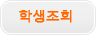
<style>
.page{position:relative;width:96px;height:35px;background:#f0f0f0}
.page>*{position:absolute;margin:0}
.t1{font:14px "DotumChe";color:#ff6600;font-weight:bold}
</style>
<div class="page">
<p class="t1" style="left:19px;top:10px;width:53px;height:13px">학생조회</p>
</div>
